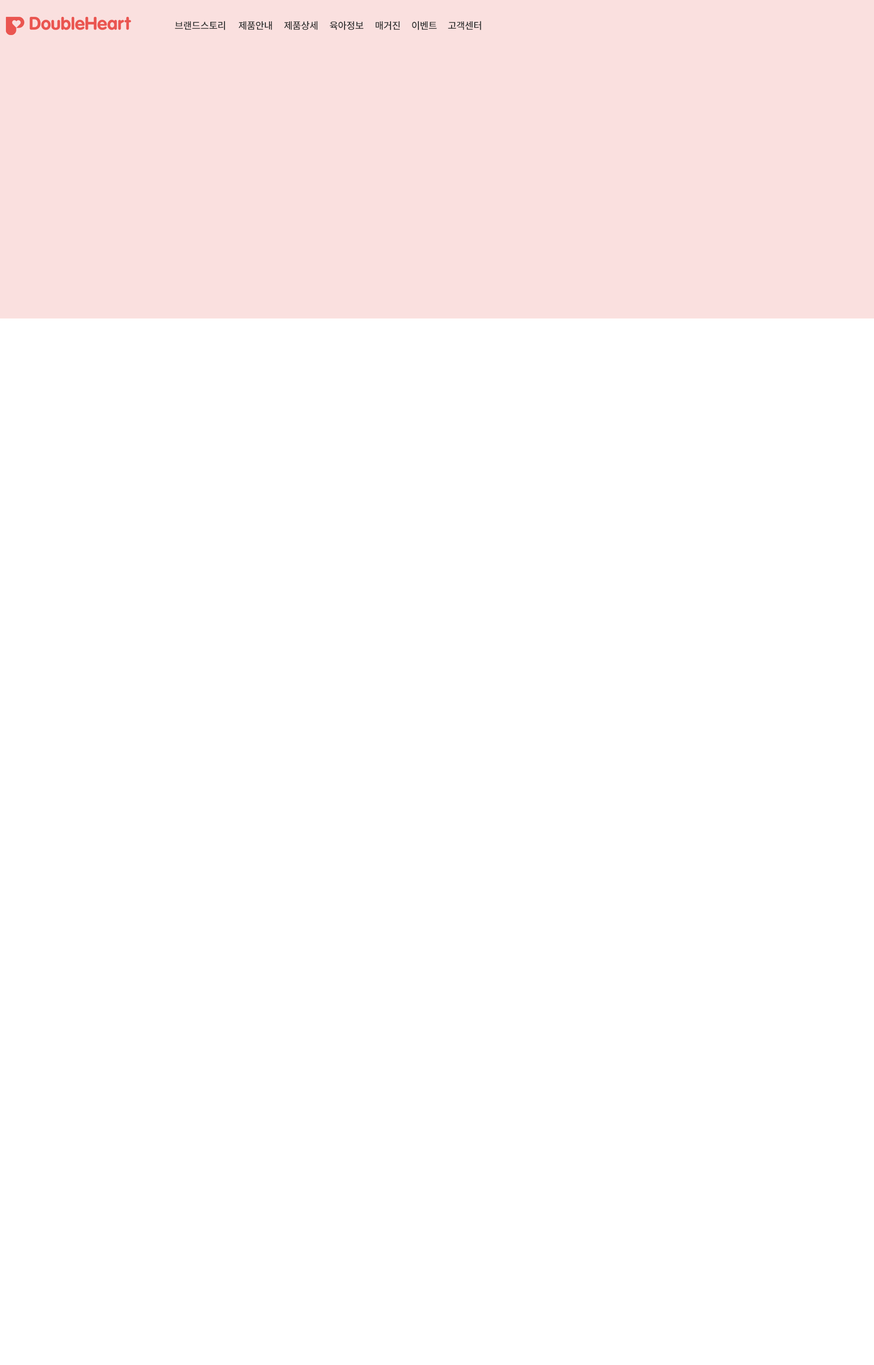
<style>
.page{position:relative;width:874px;height:1365px;background:#ffffff}
.page>*{position:absolute;margin:0}
.t1{font:9.6px "NotoSansKR-Medium";letter-spacing:-0.025em;color:#333333}
</style>
<div class="page">
<p class="t1" style="left:175px;top:21px;width:50px;height:9px">브랜드스토리</p>
<p class="t1" style="left:238px;top:21px;width:34px;height:9px">제품안내</p>
<p class="t1" style="left:284px;top:21px;width:34px;height:9px">제품상세</p>
<p class="t1" style="left:329px;top:21px;width:35px;height:9px">육아정보</p>
<p class="t1" style="left:375px;top:21px;width:25px;height:9px">매거진</p>
<p class="t1" style="left:412px;top:21px;width:25px;height:9px">이벤트</p>
<p class="t1" style="left:448px;top:21px;width:33px;height:9px">고객센터</p>
</div>
